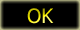
<style>
.page{position:relative;width:80px;height:30px;background:#000000}
.page>*{position:absolute;margin:0}
.t1{font:20px "Tahoma"}
</style>
<div class="page">
<p class="t1" style="left:8px;top:0px;width:65px;height:30px">OK</p>
</div>
